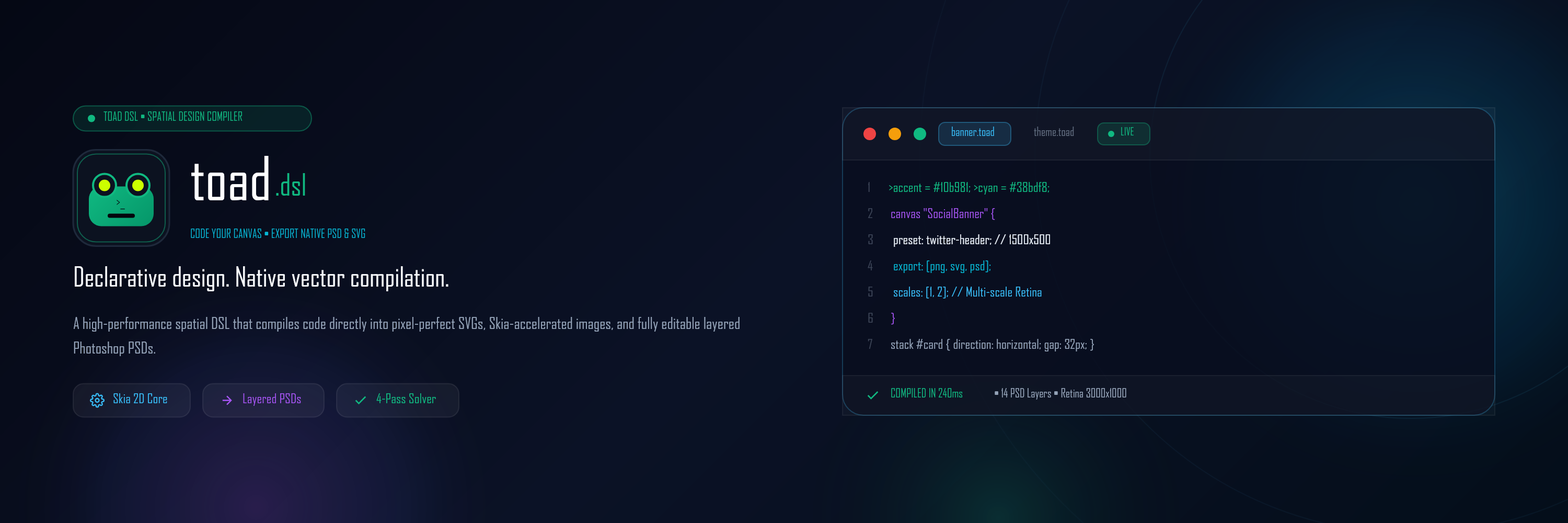
<style>
.page{position:relative;width:1568px;height:523px}
.page>*{position:absolute;margin:0}
.t1{font:11.5px "sans-serif-Bold";letter-spacing:0.109em;color:#10b981}
.t2{font:11.5px "sans-serif-Bold";color:#38bdf8}
.t3{font:11.5px "sans-serif-Regular"}
.t4{font:10.5px "sans-serif-Regular";letter-spacing:0.1em;color:#10b981;font-weight:bold}
.t5{font:58.5px "sans-serif-Regular";letter-spacing:-0.036em;color:#ffffff;font-weight:bold}
.t6{font:29.3px "sans-serif-Regular";color:#10b981;font-weight:bold}
.t7{font:13.6px "sans-serif-Regular";font-weight:bold}
.t8{font:13.6px "sans-serif-Regular";color:#10b981;font-weight:bold}
.t9{font:12.5px "sans-serif-Regular";color:#098760;font-weight:bold}
.t10{font:13.6px "sans-serif-Bold";color:#a855f7}
.t11{font:11.5px "sans-serif-Bold";letter-spacing:0.164em;color:#06b6d4}
.t12{font:13.6px "sans-serif-Regular";color:#e2e8f0}
.t13{font:26.1px "sans-serif-Regular";letter-spacing:-0.032em;color:#f8fafc;font-weight:bold}
.t14{font:13.6px "sans-serif-Regular";color:#06b6d4;font-weight:bold}
.t15{font:13.6px "sans-serif-Regular";color:#38bdf8;font-weight:bold}
.t16{font:15.7px "sans-serif-Regular";color:#94a3b8}
.t17{font:13.6px "sans-serif-Regular";color:#94a3b8}
.t18{font:11.5px "sans-serif-Regular";letter-spacing:0.073em;color:#10b981;font-weight:bold}
.t19{font:11.5px "sans-serif-Regular";color:#94a3b8}
.t20{font:13.6px "sans-serif-Regular";color:#a855f7;font-weight:bold}
</style>
<div class="page">
<p class="t1" style="left:103px;top:111px;width:194px;height:15px">TOAD DSL • SPATIAL DESIGN COMPILER</p>
<p class="t2" style="left:951px;top:126px;width:47px;height:15px">banner.toad</p>
<p class="t3" style="left:1034px;top:126px;width:41px;height:15px">theme.toad</p>
<p class="t4" style="left:1121px;top:127px;width:18px;height:14px">LIVE</p>
<p class="t5" style="left:190px;top:153px;width:82px;height:73px">toad</p>
<p class="t6" style="left:275px;top:171px;width:34px;height:37px">.dsl</p>
<p class="t7" style="left:868px;top:181px;width:4px;height:17px">1</p>
<p class="t8" style="left:889px;top:181px;width:179px;height:17px">&gt;accent = #10b981; &gt;cyan = #38bdf8;</p>
<p class="t9" style="left:116px;top:197px;width:10px;height:15px">&gt;_</p>
<p class="t7" style="left:868px;top:207px;width:6px;height:17px">2</p>
<p class="t10" style="left:891px;top:207px;width:114px;height:17px">canvas "SocialBanner" {</p>
<p class="t11" style="left:190px;top:228px;width:270px;height:15px">CODE YOUR CANVAS • EXPORT NATIVE PSD &amp; SVG</p>
<p class="t7" style="left:868px;top:233px;width:6px;height:17px">3</p>
<p class="t12" style="left:891px;top:233px;width:171px;height:17px">preset: twitter-header; // 1500x500</p>
<p class="t13" style="left:73px;top:265px;width:711px;height:32px">Declarative design. Native vector compilation.</p>
<p class="t7" style="left:868px;top:259px;width:6px;height:17px">4</p>
<p class="t14" style="left:891px;top:259px;width:118px;height:17px">export: [png, svg, psd];</p>
<p class="t7" style="left:868px;top:285px;width:6px;height:17px">5</p>
<p class="t15" style="left:891px;top:285px;width:174px;height:17px">scales: [1, 2]; // Multi-scale Retina</p>
<p class="t16" style="left:73px;top:316px;width:680px;height:49px">A high-performance spatial DSL that compiles code directly into pixel-perfect SVGs, Skia-accelerated images, and fully editable layered<br>Photoshop PSDs.</p>
<p class="t7" style="left:868px;top:312px;width:6px;height:16px">6</p>
<p class="t10" style="left:891px;top:312px;width:5px;height:16px">}</p>
<p class="t7" style="left:868px;top:338px;width:6px;height:16px">7</p>
<p class="t17" style="left:891px;top:338px;width:203px;height:16px">stack #card { direction: horizontal; gap: 32px; }</p>
<p class="t18" style="left:891px;top:388px;width:93px;height:14px">COMPILED IN 240ms</p>
<p class="t19" style="left:994px;top:388px;width:140px;height:14px">• 14 PSD Layers • Retina 3000x1000</p>
<p class="t15" style="left:113px;top:392px;width:61px;height:17px">Skia 2D Core</p>
<p class="t20" style="left:243px;top:392px;width:64px;height:17px">Layered PSDs</p>
<p class="t8" style="left:376px;top:392px;width:66px;height:17px">4-Pass Solver</p>
</div>
